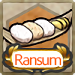
<style>
.page{position:relative;width:75px;height:75px}
.page>*{position:absolute;margin:0}
.t1{font:16px "AdobeClean-Regular";letter-spacing:-0.08em;color:#ff5a00}
</style>
<div class="page">
<p class="t1" style="left:15px;top:54px;width:47px;height:12px">Ransum</p>
</div>
